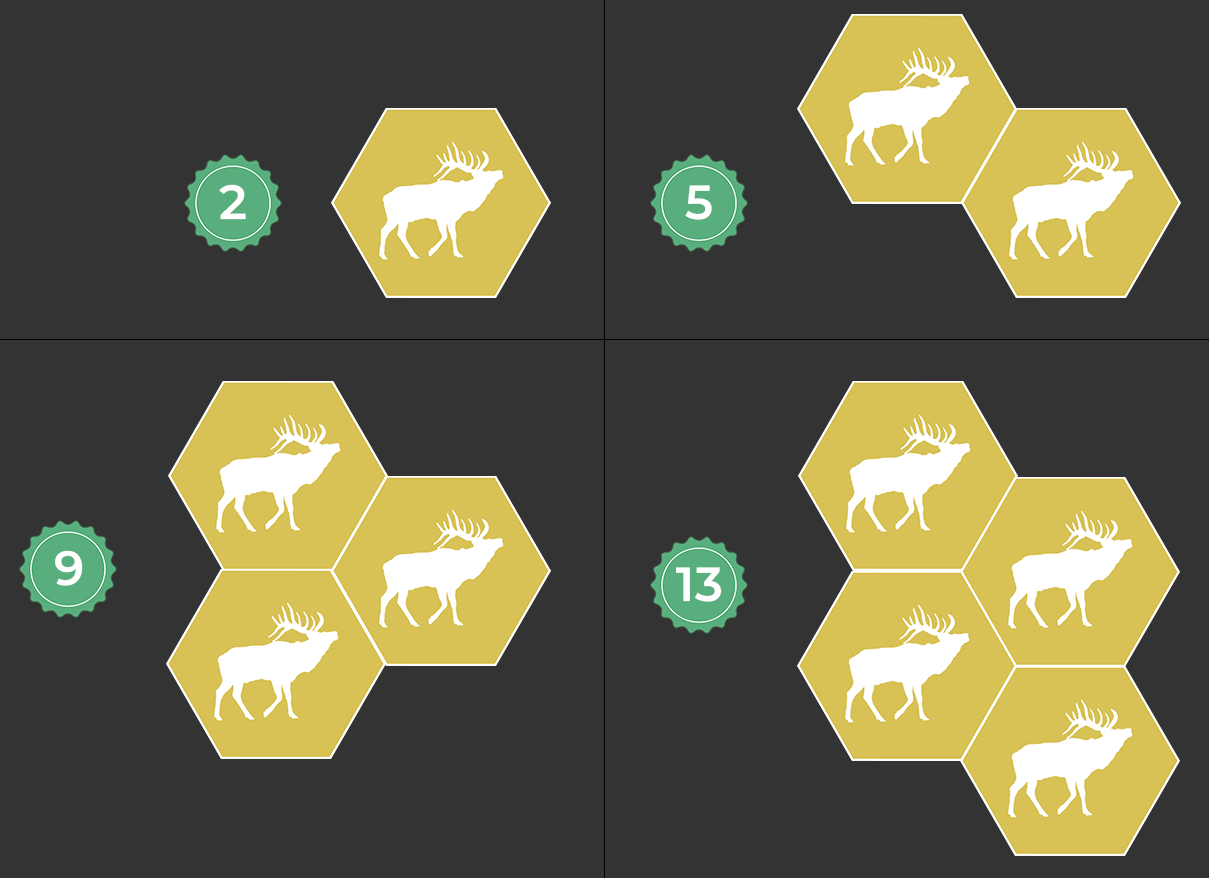
<style>
.page{position:relative;width:1209px;height:878px;background:#333333}
.page>*{position:absolute;margin:0}
.t1{font:48px "MontserratRoman-SemiBold";color:#ffffff}
</style>
<div class="page">
<p class="t1" style="left:219px;top:184px;width:27px;height:36px">2</p>
<p class="t1" style="left:685px;top:185px;width:27px;height:35px">5</p>
<p class="t1" style="left:55px;top:550px;width:28px;height:36px">9</p>
<p class="t1" style="left:676px;top:567px;width:46px;height:35px">13</p>
</div>
